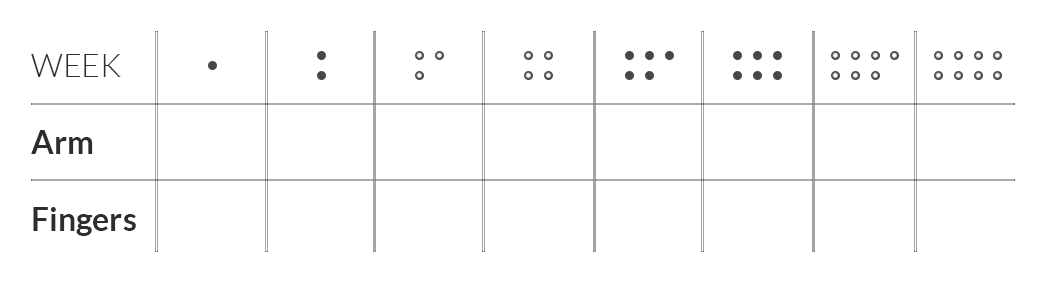
<style>
.page{position:relative;width:1056px;height:288px;background:#ffffff}
.page>*{position:absolute;margin:0}
.t1{font:32px "Lato-Bold";color:#2d2d2d}
.t2{font:32px "Lato-Light";color:#2d2d2d}
</style>
<div class="page">
<p class="t1" style="left:31px;top:54px;width:105px;height:182px"><span class="t2">WEEK  </span><br><br>Arm<br><br>Fingers</p>
</div>
